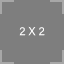
<style>
.page{position:relative;width:64px;height:64px;background:#7e7e7e}
.page>*{position:absolute;margin:0}
.t1{font:12px "AcuminConcept-Regular";color:#ffffff}
</style>
<div class="page">
<p class="t1" style="left:19px;top:26px;width:26px;height:10px">2 X 2</p>
</div>
